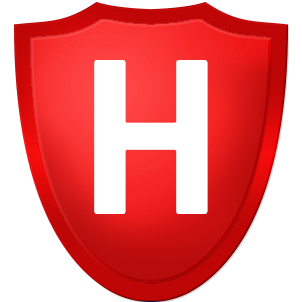
<style>
.page{position:relative;width:302px;height:302px;background:#ffffff}
.page>*{position:absolute;margin:0}
.t1{font:220px "Barlow-Bold";color:#ffffff}
</style>
<div class="page">
<p class="t1" style="left:94px;top:60px;width:114px;height:154px">H</p>
</div>
